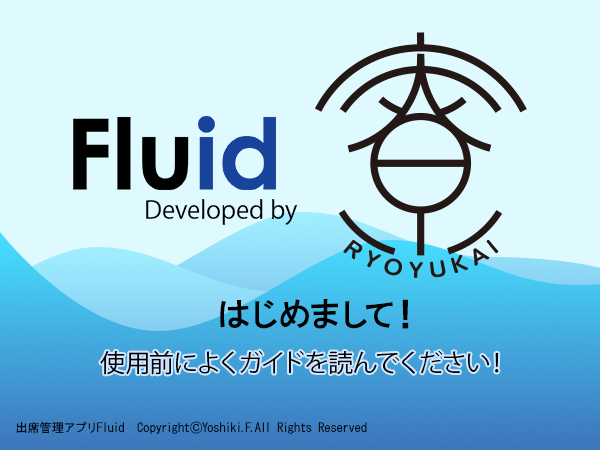
<style>
.page{position:relative;width:600px;height:450px;background:#dffaff}
.page>*{position:absolute;margin:0}
.t1{font:25px "KozGoPr6N-Regular";color:#000000}
.t2{font:33.3px "HGGothicE";color:#000000}
.t3{font:12.5px "HGGothicM";color:#000000}
</style>
<div class="page">
<p class="t1" style="left:146px;top:199px;width:152px;height:26px">Developed by</p>
<p class="t2" style="left:220px;top:299px;width:189px;height:30px">はじめまして！</p>
<p class="t1" style="left:100px;top:350px;width:399px;height:25px">使用前によくガイドを読んでください！</p>
<p class="t3" style="left:16px;top:421px;width:351px;height:13px">出席管理アプリFluid  Copyright©Yoshiki.F.All Rights Reserved</p>
</div>
